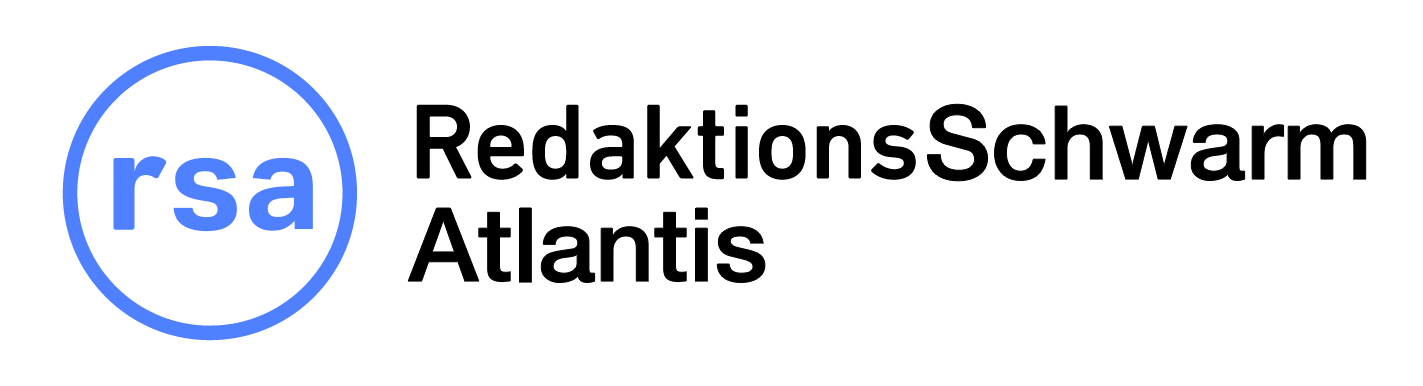
<style>
.page{position:relative;width:1423px;height:386px;background:#ffffff}
.page>*{position:absolute;margin:0}
.t1{font:102.1px "HelveticaNeueMedium";color:#000000}
.t2{font:132.9px "AktivGrotesk-Bold";letter-spacing:0.025em;color:#4f81fe}
</style>
<div class="page">
<p class="t1" style="left:927px;top:104px;width:439px;height:77px">Schwarm</p>
<p class="t2" style="left:173px;top:157px;width:140px;height:75px">sa</p>
<p class="t1" style="left:408px;top:208px;width:357px;height:75px">Atlantis</p>
</div>
